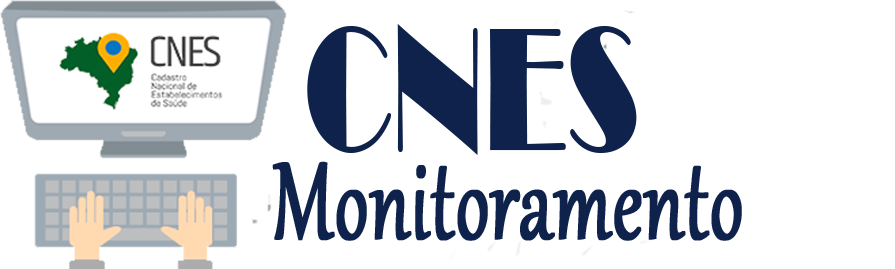
<style>
.page{position:relative;width:895px;height:269px;background:#ffffff}
.page>*{position:absolute;margin:0}
.t1{font:180.8px "Broadway";color:#0e224b;scale:0.69 1}
.t2{font:133.3px "Gabriola";color:#0e224b;font-weight:bold;scale:0.69 1}
</style>
<div class="page">
<p class="t1" style="left:307px;top:24px;width:330px;height:131px">CNES</p>
<p class="t2" style="left:272px;top:161px;width:470px;height:80px">Monitoramento</p>
</div>
